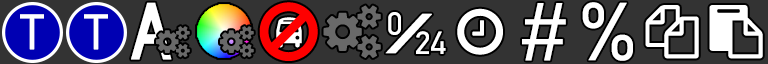
<style>
.page{position:relative;width:768px;height:64px;background:#333333}
.page>*{position:absolute;margin:0}
.t1{font:84px "HighwayGothic";color:#ffffff;font-weight:bold;scale:0.84 1}
.t2{font:85.7px "Gidole-Regular";letter-spacing:-0.64em;color:#ffffff;font-weight:bold}
.t3{font:52px "Gidole-Regular";color:#ffffff;font-weight:bold}
.t4{font:32.1px "Gidole-Regular";color:#ffffff;font-weight:bold}
.t5{font:32.1px "Gidole-Regular";letter-spacing:-0.64em;color:#ffffff;font-weight:bold}
.t6{font:44px "Gidole-Regular";letter-spacing:-0.16em;color:#ffffff;font-weight:bold;scale:3.44 1}
</style>
<div class="page">
<p class="t1" style="left:131px;top:2px;width:41px;height:58px">A</p>
<p class="t2" style="left:522px;top:3px;width:44px;height:58px">#</p>
<p class="t2" style="left:582px;top:2px;width:51px;height:59px">%</p>
<p class="t3" style="left:20px;top:14px;width:24px;height:36px">T</p>
<p class="t3" style="left:84px;top:14px;width:24px;height:36px">T</p>
<p class="t4" style="left:385px;top:12px;width:61px;height:42px"><span class="t5">0</span><span class="t6">/</span>24</p>
</div>
